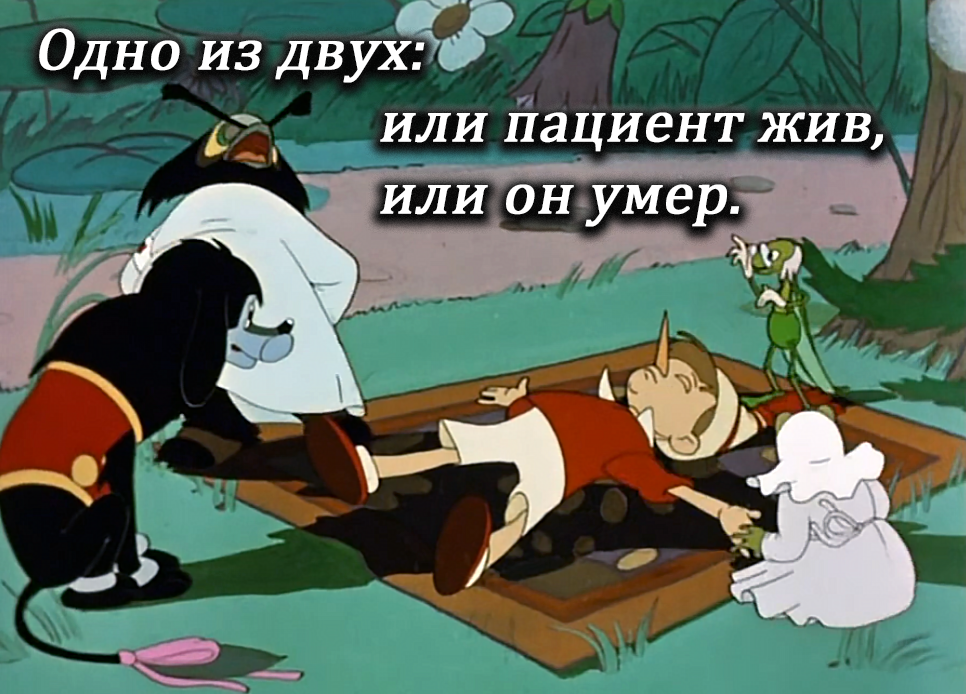
<style>
.page{position:relative;width:966px;height:694px}
.page>*{position:absolute;margin:0}
.t1{font:60px "Cambria";color:#ffffff;font-weight:bold;font-style:italic}
</style>
<div class="page">
<p class="t1" style="left:39px;top:28px;width:844px;height:199px">Одно из двух: <br>                       или пациент жив,<br>                       или он умер.</p>
</div>
